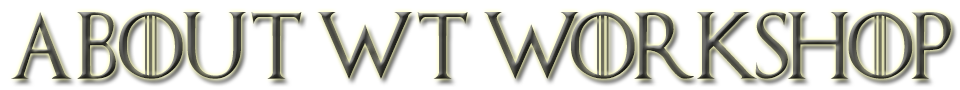
<style>
.page{position:relative;width:960px;height:90px;background:#ffffff}
.page>*{position:absolute;margin:0}
.t1{font:66.7px "GameofThrones";scale:0.96 1}
</style>
<div class="page">
<p class="t1" style="left:11px;top:12px;width:940px;height:67px">ABOUT wt WORKSHOP</p>
</div>
